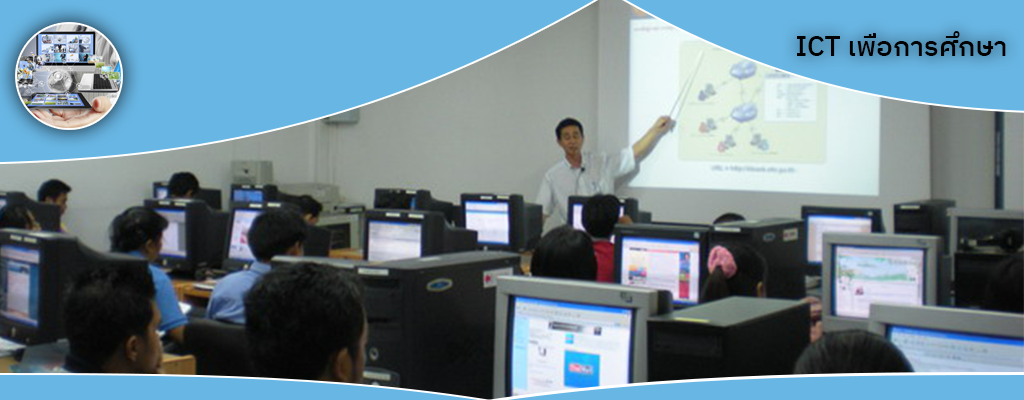
<style>
.page{position:relative;width:1024px;height:400px}
.page>*{position:absolute;margin:0}
.t1{font:28px "IBMPlexSansThai-Medm";color:#000000}
</style>
<div class="page">
<p class="t1" style="left:797px;top:31px;width:209px;height:25px">ICT เพื่อการศึกษา</p>
</div>
